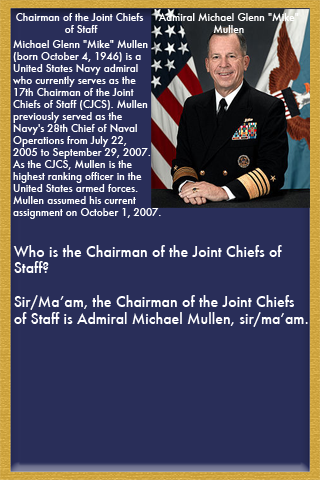
<style>
.page{position:relative;width:320px;height:480px;background:#292e59}
.page>*{position:absolute;margin:0}
.t1{font:10px "Futura-Medium";color:#ffffff}
.t2{font:14px "Futura-Medium";color:#ffffff}
</style>
<div class="page">
<p class="t1" style="left:16px;top:13px;width:128px;height:20px;text-align:center">Chairman of the Joint Chiefs <br>of Staff</p>
<p class="t1" style="left:158px;top:13px;width:141px;height:20px;text-align:center">Admiral Michael Glenn "Mike" <br>Mullen</p>
<p class="t1" style="left:12px;top:40px;width:149px;height:179px">Michael Glenn "Mike" Mullen <br>(born October 4, 1946) is a <br>United States Navy admiral <br>who currently serves as the <br>17th Chairman of the Joint <br>Chiefs of Staff (CJCS). Mullen <br>previously served as the <br>Navy's 28th Chief of Naval <br>Operations from July 22, <br>2005 to September 29, 2007. <br>As the CJCS, Mullen is the <br>highest ranking officer in the <br>United States armed forces. <br>Mullen assumed his current <br>assignment on October 1, 2007.</p>
<p class="t2" style="left:13px;top:245px;width:295px;height:82px">Who is the Chairman of the Joint Chiefs of <br>Staff?<br><br>Sir/Ma’am, the Chairman of the Joint Chiefs <br>of Staff is Admiral Michael Mullen, sir/ma’am.</p>
</div>
